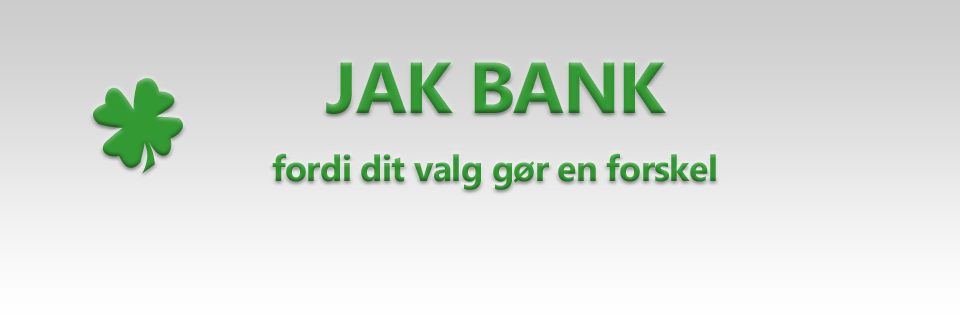
<style>
.page{position:relative;width:960px;height:320px}
.page>*{position:absolute;margin:0}
.t1{font:36px/1.8px "MicrosoftTaiLe-Bold";letter-spacing:-0.02em;color:#339933}
.t2{font:72px/1.8px "MicrosoftTaiLe-Bold";letter-spacing:-0.02em;color:#339933}
</style>
<div class="page">
<p class="t1" style="left:272px;top:62px;width:444px;height:128px;text-align:center"><span class="t2">JAK BANK<br><br><br><br><br><br><br><br><br><br><br><br><br><br><br><br><br><br><br><br><br><br><br><br><br><br><br><br><br><br><br><br><br><br><br><br><br></span>fordi dit valg gør en forskel</p>
</div>
